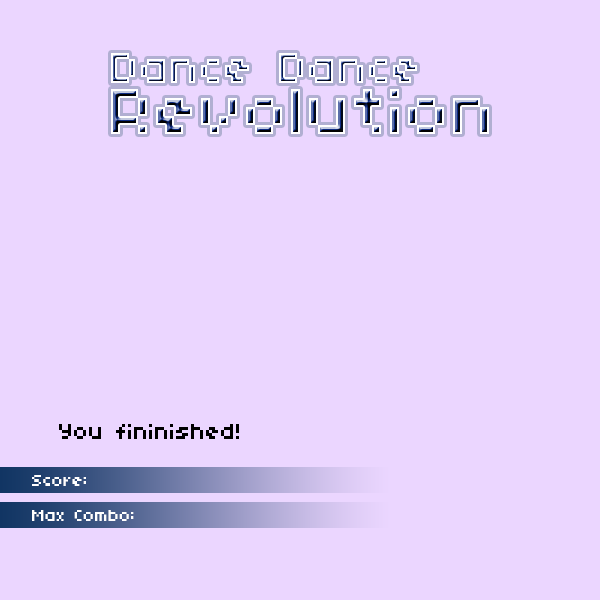
<style>
.page{position:relative;width:600px;height:600px;background:#ebd6ff}
.page>*{position:absolute;margin:0}
.t1{font:24px "04b03";color:#000000}
.t2{font:18px "04b03";color:#ffffff}
</style>
<div class="page">
<p class="t1" style="left:59px;top:424px;width:180px;height:15px">You fininished!</p>
<p class="t2" style="left:32px;top:475px;width:54px;height:11px">Score:</p>
<p class="t2" style="left:32px;top:510px;width:102px;height:11px">Max Combo:</p>
</div>
